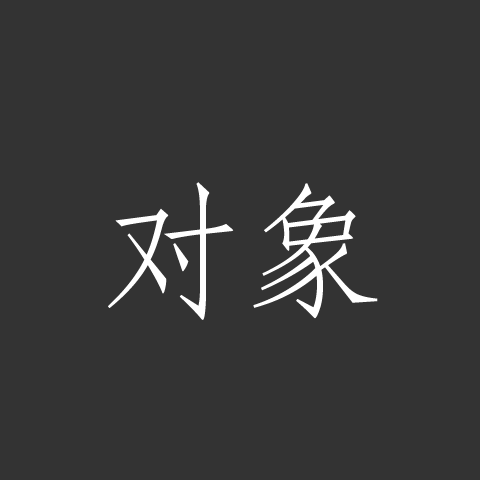
<style>
.page{position:relative;width:480px;height:480px;background:#333333}
.page>*{position:absolute;margin:0}
.t1{font:144px "STFangsong";color:#ffffff}
</style>
<div class="page">
<p class="t1" style="left:108px;top:182px;width:270px;height:138px">对象</p>
</div>
